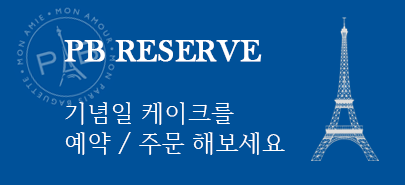
<style>
.page{position:relative;width:405px;height:185px;background:#005199}
.page>*{position:absolute;margin:0}
.t1{font:24px/30px "HCRBatang";color:#ffffff}
.t2{font:32px/36px "BaskOldFace";color:#ffffff;font-weight:bold}
.t3{font:32px/30px "BaskOldFace";color:#ffffff;font-weight:bold}
</style>
<div class="page">
<p class="t1" style="left:64px;top:40px;width:221px;height:115px"><span class="t2">PB RES</span><span class="t3">ERVE<br> <br></span>기념일 케이크를<br>예약 / 주문 해보세요</p>
</div>
